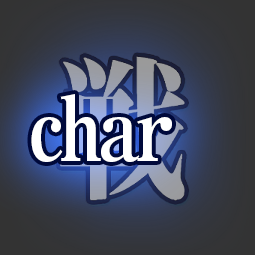
<style>
.page{position:relative;width:255px;height:255px}
.page>*{position:absolute;margin:0}
.t1{font:90px "RyuminPro-ExBold";letter-spacing:-0.08em;color:#ffffff;scale:0.85 1}
</style>
<div class="page">
<p class="t1" style="left:31px;top:94px;width:141px;height:68px">char</p>
</div>
